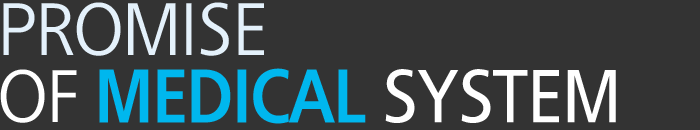
<style>
.page{position:relative;width:700px;height:130px;background:#333333}
.page>*{position:absolute;margin:0}
.t1{font:71.1px/67px "RixBGoPL";letter-spacing:-0.032em;color:#e4f1fb;scale:0.93 1}
.t2{font:71.1px/67px "RixBGoPL";letter-spacing:-0.032em;color:#ffffff;scale:0.93 1}
.t3{font:71.1px/67px "RixBGoPEB";letter-spacing:-0.032em;color:#00b7ee;scale:0.93 1}
.t4{font:71.1px/67px "RixBGoPM";letter-spacing:-0.032em;color:#ffffff;scale:0.93 1}
</style>
<div class="page">
<p class="t1" style="left:0px;top:2px;width:616px;height:122px">PROMISE<br><span class="t2">OF </span><span class="t3">MEDICAL </span><span class="t4">SYSTEM</span></p>
</div>
